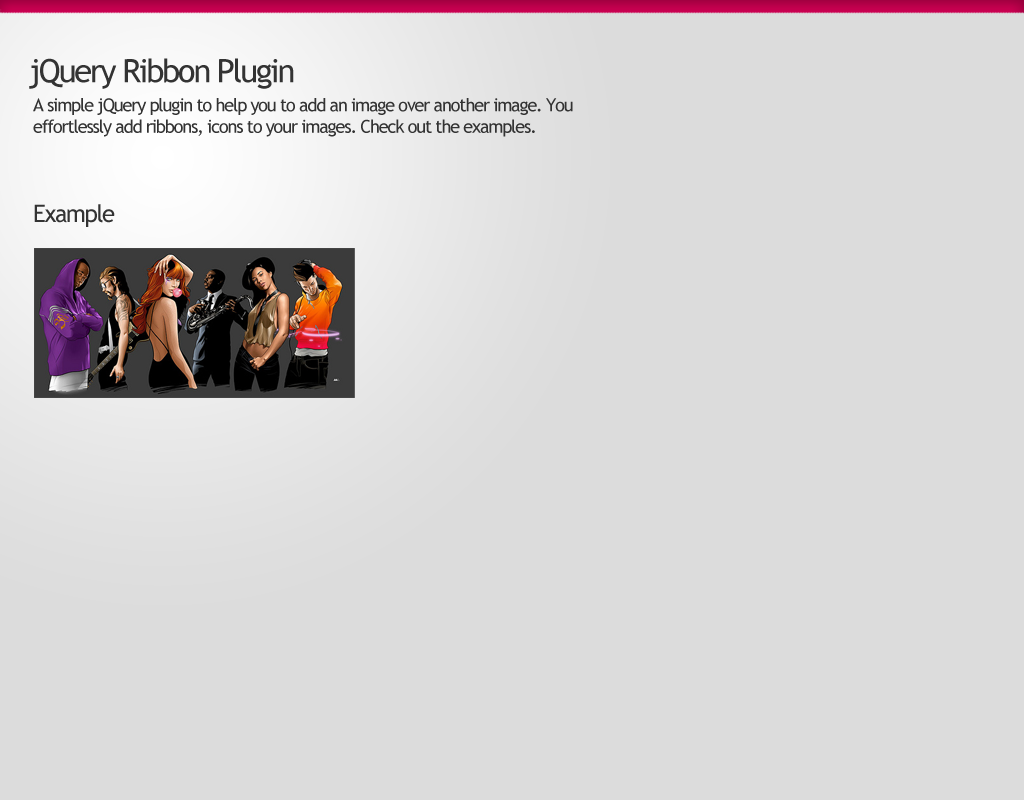
<style>
.page{position:relative;width:1024px;height:800px;background:#dcdcdc}
.page>*{position:absolute;margin:0}
.t1{font:32.1px "TrebuchetMS";letter-spacing:-0.06em;color:#333333}
.t2{font:18px "TrebuchetMS";letter-spacing:-0.06em;color:#333333}
.t3{font:24px "TrebuchetMS";letter-spacing:-0.06em;color:#333333}
</style>
<div class="page">
<p class="t1" style="left:29px;top:58px;width:265px;height:31px">jQuery Ribbon Plugin</p>
<p class="t2" style="left:33px;top:98px;width:540px;height:39px">A simple jQuery plugin to help you to add an image over another image. You <br>effortlessly add ribbons, icons to your images. Check out the examples.</p>
<p class="t3" style="left:34px;top:204px;width:81px;height:23px">Example</p>
</div>
